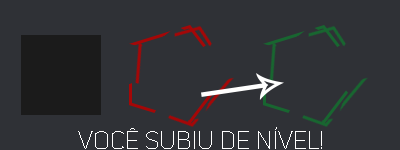
<style>
.page{position:relative;width:400px;height:150px;background:#2f3136}
.page>*{position:absolute;margin:0}
.t1{font:25px "UniSans-Thin";color:#ffffff;text-transform:uppercase}
</style>
<div class="page">
<p class="t1" style="left:78px;top:127px;width:244px;height:22px">você subiu de nível!</p>
</div>
